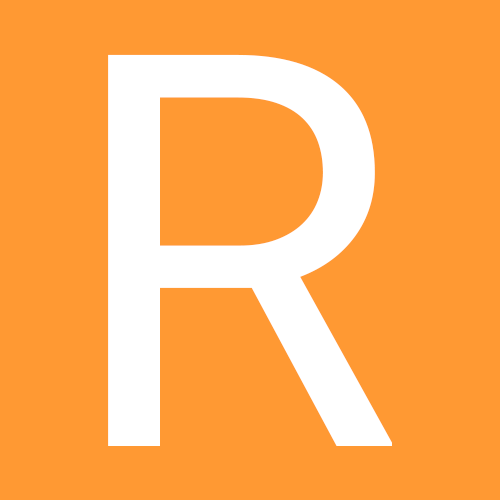
<style>
.page{position:relative;width:500px;height:500px;background:#ff9933}
.page>*{position:absolute;margin:0}
.t1{font:550px "Roboto-Regular";color:#ffffff}
</style>
<div class="page">
<p class="t1" style="left:108px;top:54px;width:284px;height:392px">R</p>
</div>
